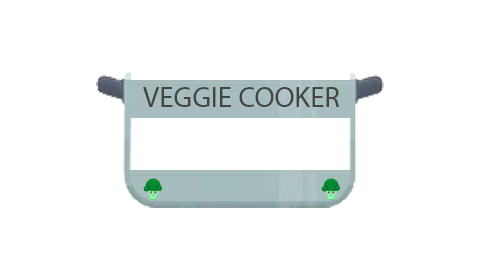
<style>
.page{position:relative;width:480px;height:270px;background:#ffffff}
.page>*{position:absolute;margin:0}
.t1{font:29px "MyriadPro-Regular";color:#444444}
</style>
<div class="page">
<p class="t1" style="left:143px;top:87px;width:197px;height:20px">VEGGIE COOKER</p>
</div>
